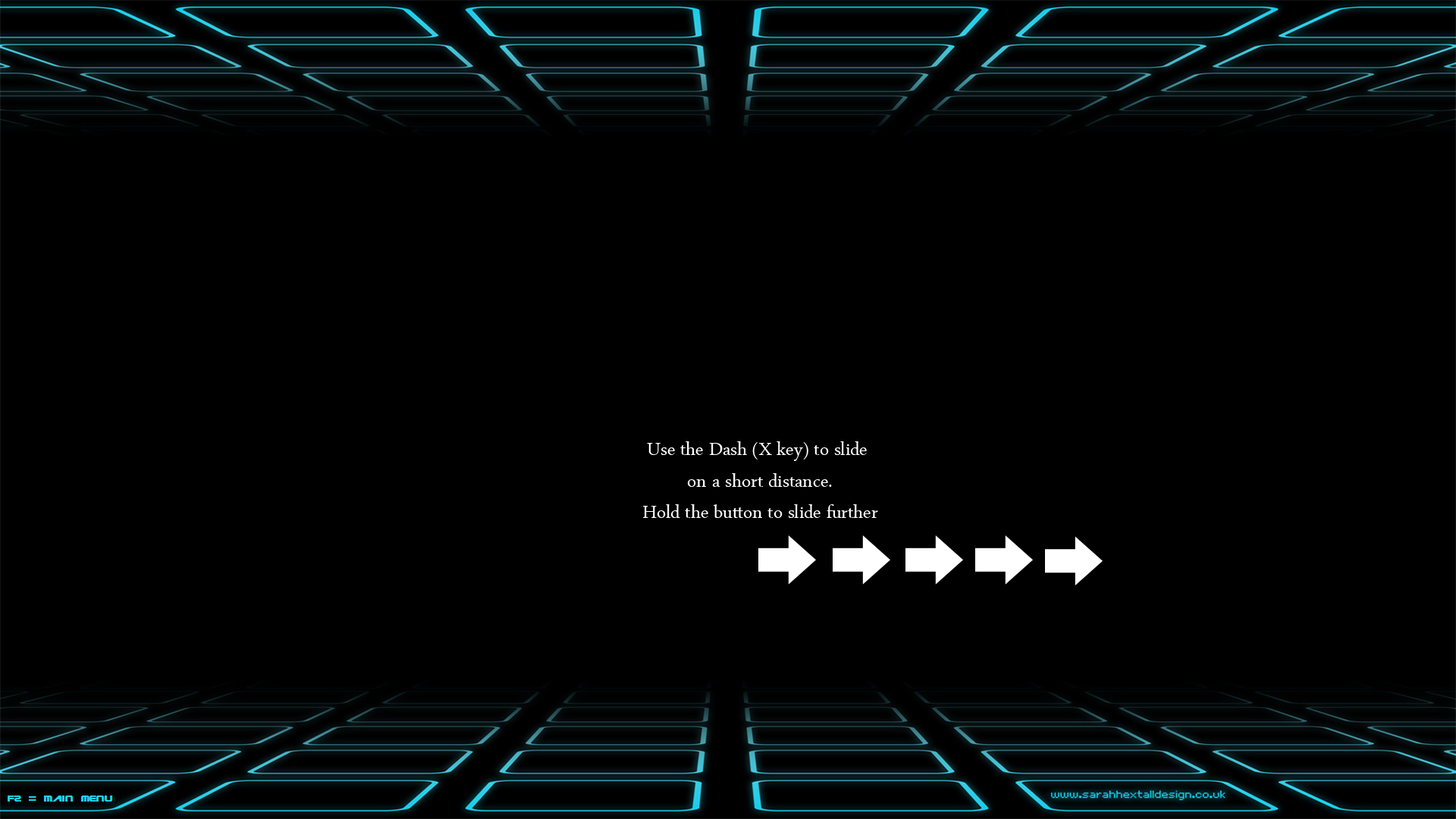
<style>
.page{position:relative;width:1456px;height:819px;background:#000000}
.page>*{position:absolute;margin:0}
.t1{font:26.3px "ArabicTypesetting";color:#ffffff}
</style>
<div class="page">
<p class="t1" style="left:642px;top:441px;width:236px;height:77px;text-align:center">Use the Dash (X key) to slide <br>on a short distance.<br>Hold the button to slide further</p>
</div>
